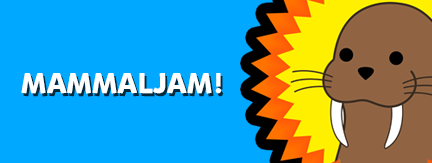
<style>
.page{position:relative;width:432px;height:163px;background:#00a8ff}
.page>*{position:absolute;margin:0}
.t1{font:28.3px "MikadoBoldDEMO";color:#ffffff}
.t2{font:28.3px "Avenir-Black";color:#ffffff}
</style>
<div class="page">
<p class="t1" style="left:21px;top:73px;width:200px;height:21px">MAMMALJAM<span class="t2">!</span></p>
</div>
